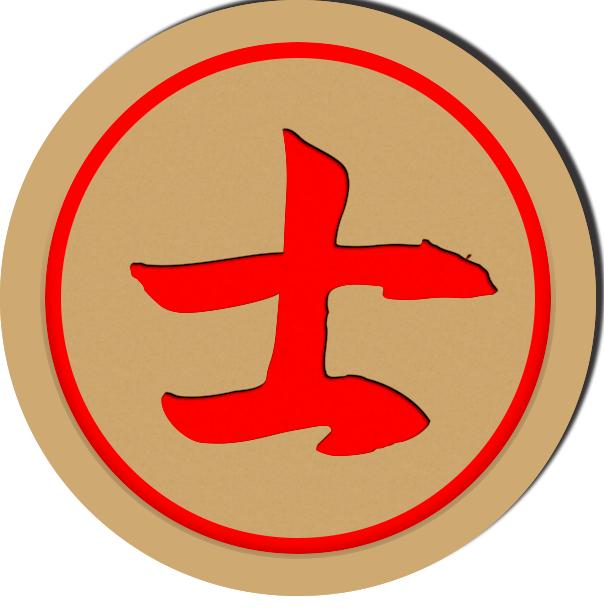
<style>
.page{position:relative;width:604px;height:608px;background:#ffffff}
.page>*{position:absolute;margin:0}
.t1{font:416.7px "AaYuwenlaoshidezi";letter-spacing:0.04em;color:#ff0000}
</style>
<div class="page">
<p class="t1" style="left:129px;top:129px;width:368px;height:327px;rotate:5deg">士</p>
<p class="t1" style="left:129px;top:129px;width:368px;height:327px;rotate:5deg">士</p>
</div>
